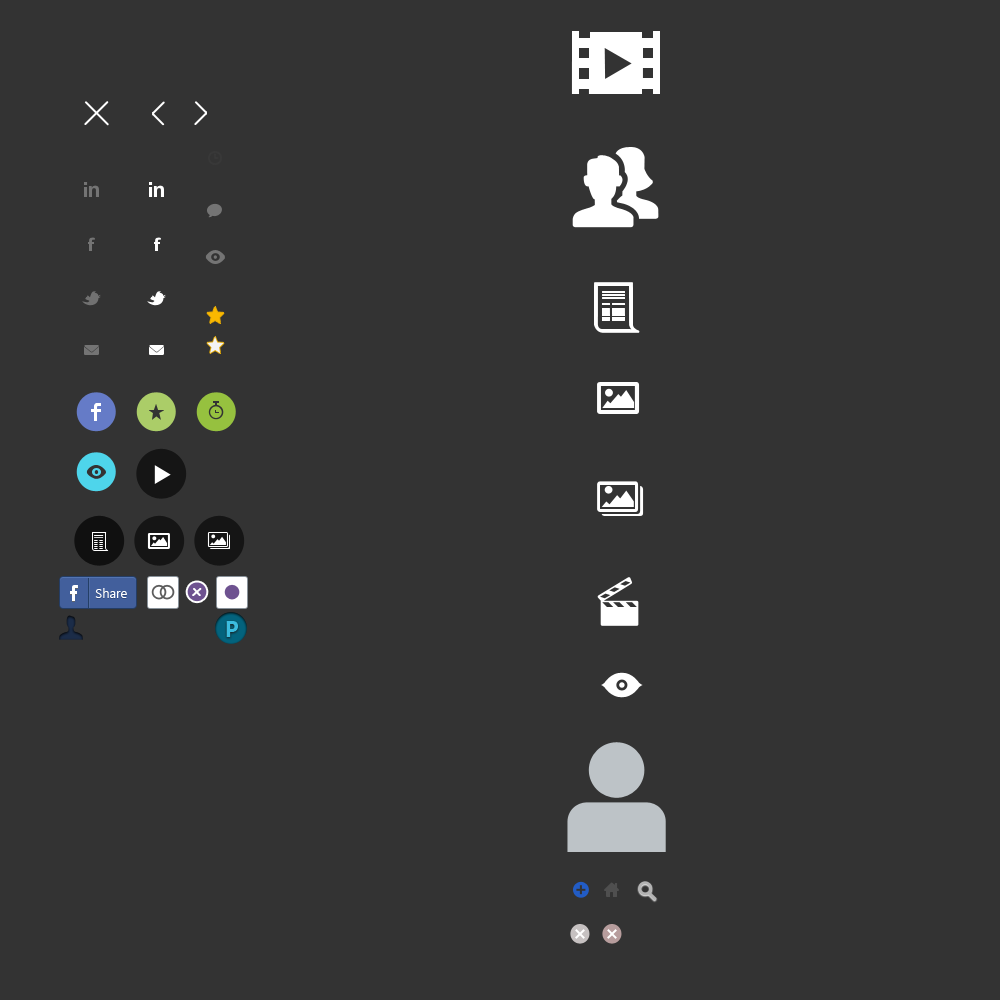
<style>
.page{position:relative;width:1000px;height:1000px;background:#333333}
.page>*{position:absolute;margin:0}
.t1{font:13px "SegoeUI";color:#ffffff}
.t2{font:16px "ComicSansMS-Bold";color:#ffffff}
.t3{font:22px "SegoeUI-Bold";color:#3bbcdf}
</style>
<div class="page">
<p class="t1" style="left:95px;top:588px;width:32px;height:10px">Share</p>
<p class="t2" style="left:192px;top:588px;width:10px;height:8px">x</p>
<p class="t3" style="left:226px;top:621px;width:12px;height:16px">P</p>
</div>
